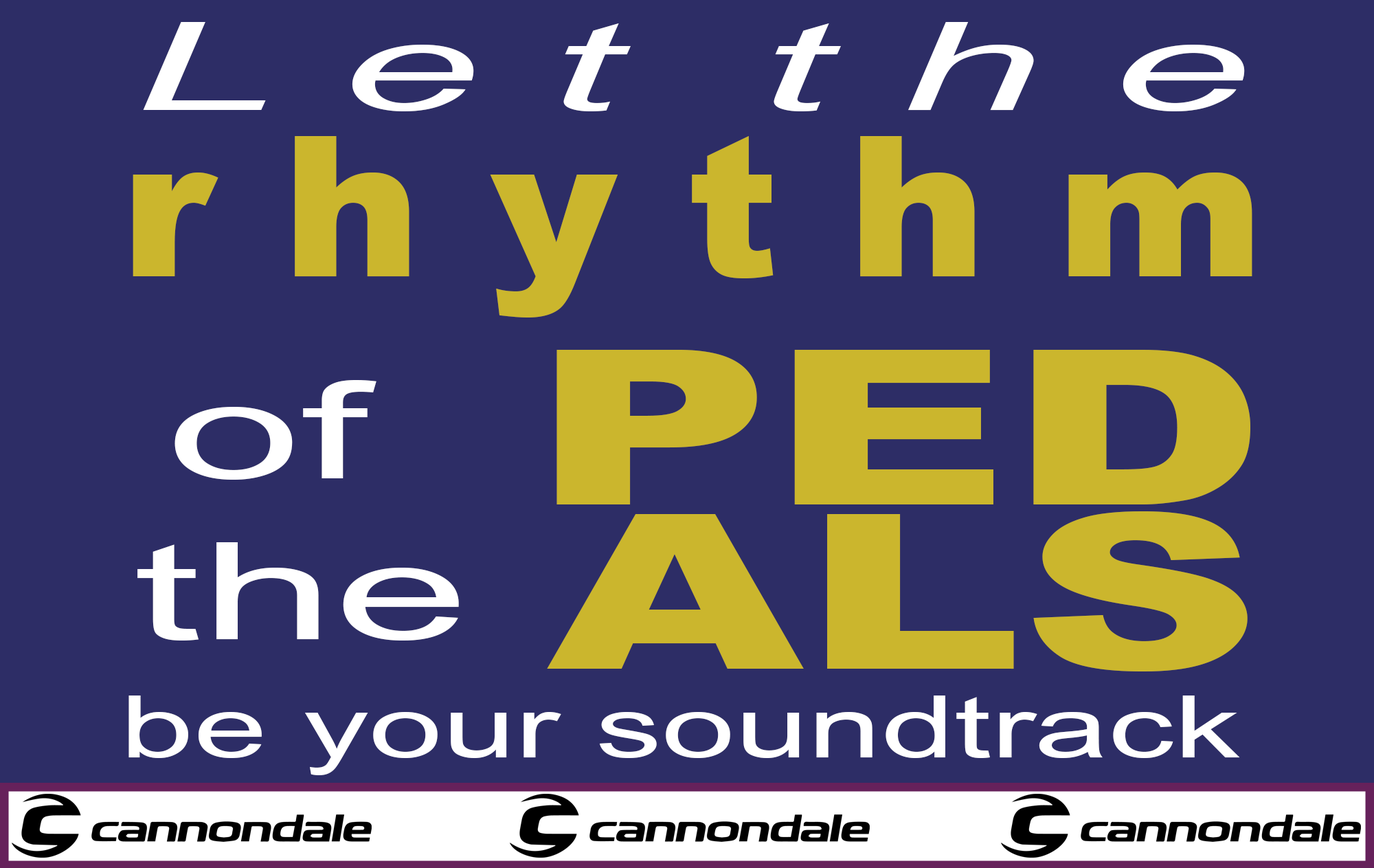
<style>
.page{position:relative;width:1374px;height:868px;background:#2d2d66}
.page>*{position:absolute;margin:0}
.t1{font:122.6px "Arial-ItalicMT";color:#ffffff;scale:2.06 1}
.t2{font:195.9px "Arial-Black";color:#cbb62d;scale:1.06 1}
.t3{font:216px "Arial-Black";color:#cbb62d;scale:1.52 1}
.t4{font:134.4px "ArialMT";color:#ffffff;scale:1.79 1}
.t5{font:86px "ArialMT";color:#ffffff;scale:1.53 1}
</style>
<div class="page">
<p class="t1" style="left:143px;top:22px;width:1102px;height:89px">L e t  t h e</p>
<p class="t2" style="left:133px;top:136px;width:1120px;height:181px">r h y t h m</p>
<p class="t3" style="left:557px;top:350px;width:693px;height:154px">PED</p>
<p class="t4" style="left:137px;top:380px;width:322px;height:260px;text-align:center">of <br>the</p>
<p class="t3" style="left:547px;top:511px;width:701px;height:160px">ALS</p>
<p class="t5" style="left:128px;top:695px;width:1112px;height:80px">be your soundtrack</p>
</div>
